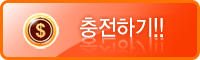
<style>
.page{position:relative;width:200px;height:60px}
.page>*{position:absolute;margin:0}
.t1{font:22px "YDIYGO330";color:#ffffff;scale:0.91 1}
</style>
<div class="page">
<p class="t1" style="left:80px;top:17px;width:83px;height:21px">충전하기!!</p>
</div>
